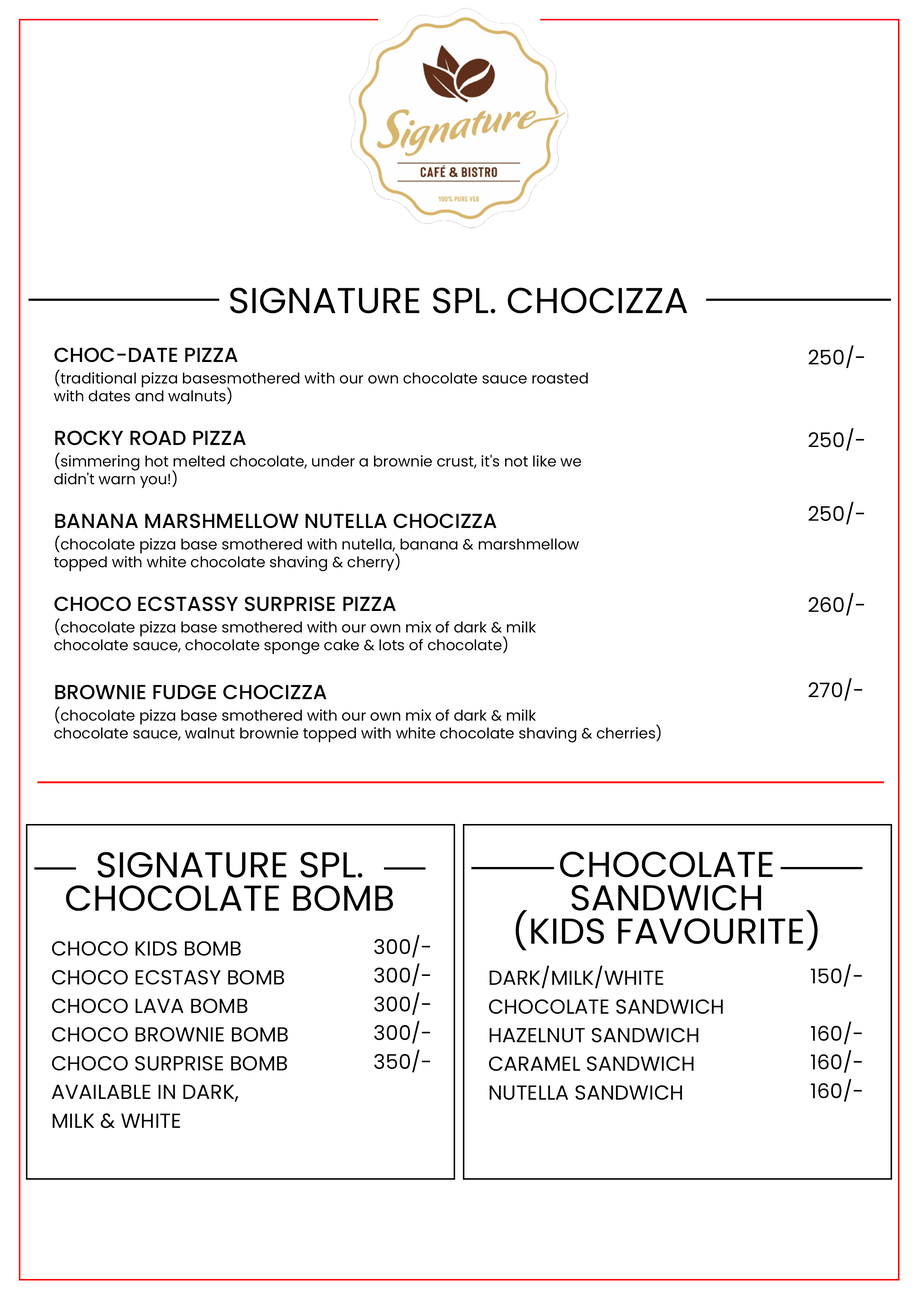
<style>
.page{position:relative;width:918px;height:1299px;background:#ffffff}
.page>*{position:absolute;margin:0}
.t1{font:35.9px "Poppins-Regular";color:#000000;text-transform:uppercase}
.t2{font:14.8px/17.8px "Poppins-Regular";color:#000000}
.t3{font:20.4px/28.7px "Poppins-Medium";color:#000000}
.t4{font:20.4px "Poppins-Regular";color:#000000}
.t5{font:35.9px/33.3px "Poppins-Regular";color:#000000;text-transform:uppercase}
.t6{font:20.4px/28.7px "Poppins-Regular";color:#000000;text-transform:uppercase}
.t7{font:20.4px/28.7px "Poppins-Regular";color:#000000}
</style>
<div class="page">
<p class="t1" style="left:230px;top:287px;width:457px;height:26px">SIGNATURE SPL. CHOCIZZA</p>
<p class="t2" style="left:54px;top:347px;width:534px;height:57px"><span class="t3">CHOC-DATE PIZZA<br></span>(traditional pizza basesmothered with our own chocolate sauce roasted<br>with dates and walnuts)</p>
<p class="t4" style="left:809px;top:345px;width:56px;height:23px">250/-</p>
<p class="t2" style="left:54px;top:430px;width:528px;height:58px"><span class="t3">ROCKY ROAD PIZZA<br></span>(simmering hot melted chocolate, under a brownie crust, it's not like we<br>didn't warn you!)</p>
<p class="t4" style="left:809px;top:428px;width:56px;height:23px">250/-</p>
<p class="t4" style="left:809px;top:502px;width:56px;height:22px">250/-</p>
<p class="t2" style="left:54px;top:513px;width:525px;height:58px"><span class="t3">BANANA MARSHMELLOW NUTELLA CHOCIZZA<br></span>(chocolate pizza base smothered with nutella, banana &amp; marshmellow<br>topped with white chocolate shaving &amp; cherry)</p>
<p class="t4" style="left:809px;top:593px;width:56px;height:23px">260/-</p>
<p class="t2" style="left:54px;top:596px;width:482px;height:58px"><span class="t3">CHOCO ECSTASSY SURPRISE PIZZA<br></span>(chocolate pizza base smothered with our own mix of dark &amp; milk<br>chocolate sauce, chocolate sponge cake &amp; lots of chocolate)</p>
<p class="t4" style="left:809px;top:678px;width:54px;height:23px">270/-</p>
<p class="t2" style="left:54px;top:685px;width:607px;height:57px"><span class="t3">BROWNIE FUDGE CHOCIZZA<br></span>(chocolate pizza base smothered with our own mix of dark &amp; milk<br>chocolate sauce, walnut brownie topped with white chocolate shaving &amp; cherries)</p>
<p class="t5" style="left:66px;top:852px;width:327px;height:59px;text-align:center">SIGNATURE SPL.<br>CHOCOLATE BOMB</p>
<p class="t5" style="left:516px;top:851px;width:302px;height:99px;text-align:center">CHOCOLATE<br>SANDWICH<br>(KIDS FAVOURITE)</p>
<p class="t6" style="left:51px;top:941px;width:237px;height:187px">CHOCO KIDS BOMB<br>CHOCO ECSTASY BOMB<br>CHOCO LAVA BOMB<br>CHOCO BROWNIE BOMB<br>CHOCO SURPRISE BOMB<br>AVAILABLE IN DARK,<br>MILK &amp; WHITE</p>
<p class="t7" style="left:374px;top:935px;width:56px;height:137px">300/-<br>300/-<br>300/-<br>300/-<br>350/-</p>
<p class="t6" style="left:489px;top:965px;width:234px;height:135px">DARK/MILK/WHITE<br>CHOCOLATE SANDWICH<br>HAZELNUT SANDWICH<br>CARAMEL SANDWICH<br>NUTELLA SANDWICH</p>
<p class="t7" style="left:811px;top:964px;width:51px;height:138px">150/-<br><br>160/-<br>160/-<br>160/-</p>
</div>
